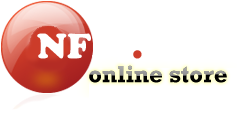
<style>
.page{position:relative;width:237px;height:140px;background:#ffffff}
.page>*{position:absolute;margin:0}
.t1{font:24px "Rockwell-Bold"}
</style>
<div class="page">
<p class="t1" style="left:89px;top:65px;width:138px;height:18px">online store</p>
</div>
